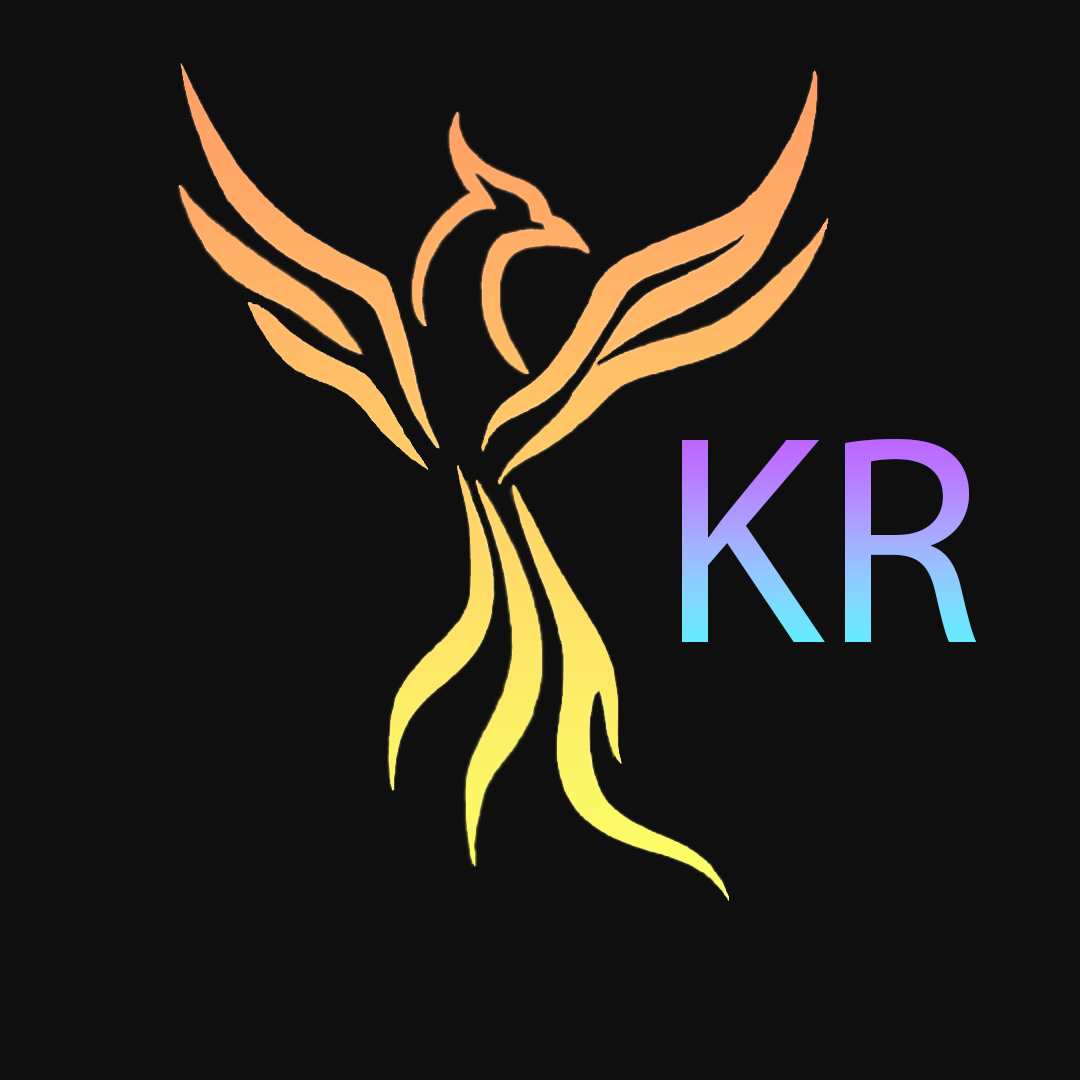
<style>
.page{position:relative;width:1080px;height:1080px;background:#0f0f0f}
.page>*{position:absolute;margin:0}
.t1{font:300px "MyriadPro-Regular"}
</style>
<div class="page">
<p class="t1" style="left:682px;top:439px;width:295px;height:203px">KR</p>
</div>
